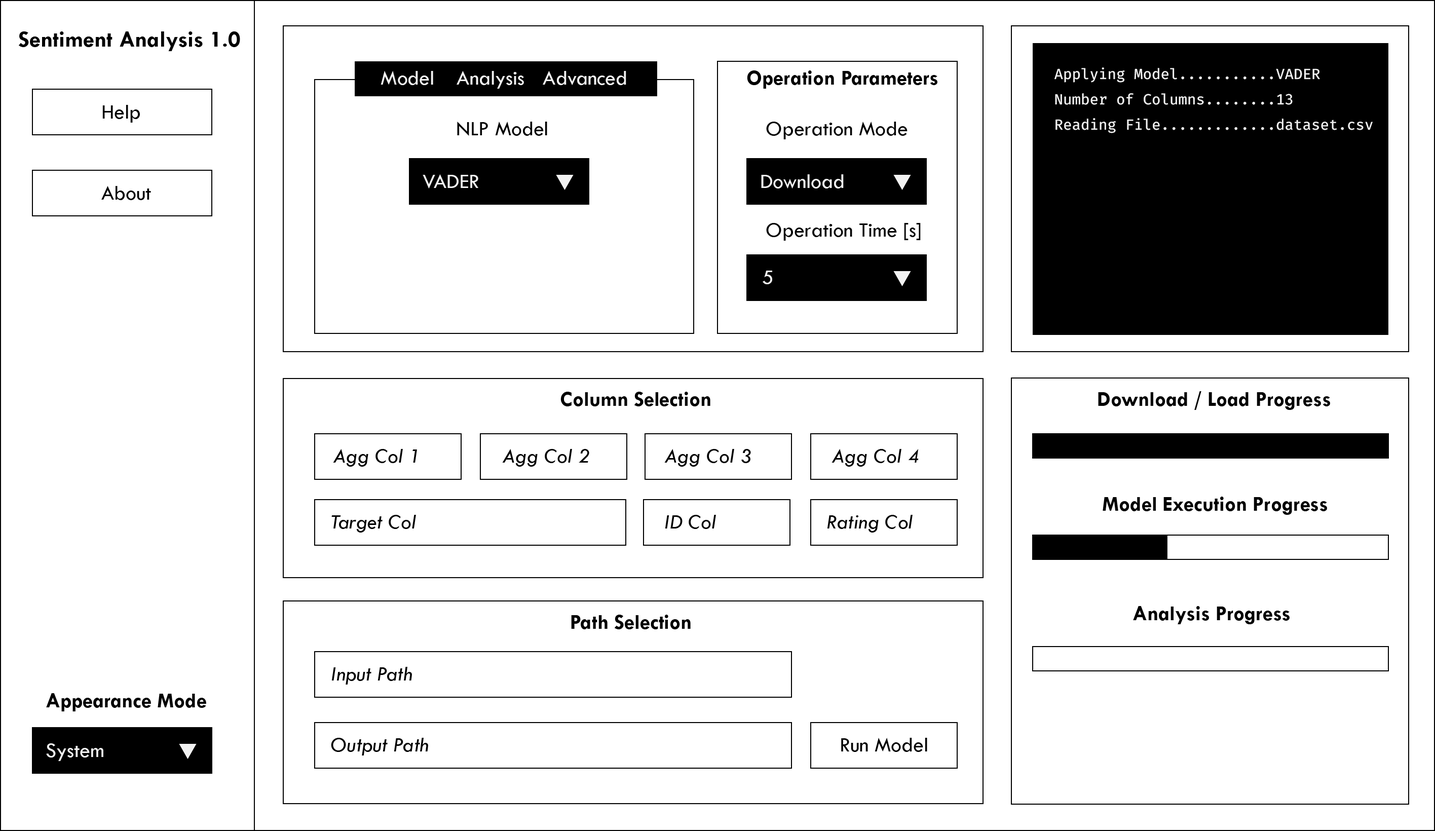
<style>
.page{position:relative;width:1435px;height:831px;background:#ffffff}
.page>*{position:absolute;margin:0}
.t1{font:23.2px "TwCenMT-Bold";color:#000000}
.t2{font:21.1px "TwCenMT-Regular";color:#f2f2f2}
.t3{font:21.1px "TwCenMT-Bold";color:#000000}
.t4{font:14.8px "FiraCode-Retina";color:#f2f2f2}
.t5{font:21.1px "TwCenMT-Regular";color:#000000}
.t6{font:21.1px "TwCenMT-Italic";color:#000000}
</style>
<div class="page">
<p class="t1" style="left:19px;top:31px;width:221px;height:20px">Sentiment Analysis 1.0</p>
<p class="t2" style="left:381px;top:71px;width:52px;height:14px">Model</p>
<p class="t2" style="left:457px;top:71px;width:67px;height:18px">Analysis</p>
<p class="t2" style="left:543px;top:71px;width:83px;height:14px">Advanced</p>
<p class="t3" style="left:747px;top:70px;width:190px;height:19px">Operation Parameters</p>
<p class="t4" style="left:1054px;top:67px;width:266px;height:16px">Applying Model...........VADER</p>
<p class="t4" style="left:1055px;top:93px;width:238px;height:12px">Number of Columns........13</p>
<p class="t5" style="left:102px;top:105px;width:38px;height:18px">Help</p>
<p class="t5" style="left:457px;top:122px;width:90px;height:14px">NLP Model</p>
<p class="t5" style="left:766px;top:122px;width:141px;height:17px">Operation Mode</p>
<p class="t4" style="left:1055px;top:118px;width:318px;height:15px">Reading File.............dataset.csv</p>
<p class="t5" style="left:101px;top:186px;width:50px;height:14px">About</p>
<p class="t2" style="left:423px;top:174px;width:55px;height:14px">VADER</p>
<p class="t2" style="left:761px;top:174px;width:83px;height:14px">Download</p>
<p class="t5" style="left:766px;top:223px;width:155px;height:18px">Operation Time [s]</p>
<p class="t2" style="left:763px;top:271px;width:9px;height:13px">5</p>
<p class="t3" style="left:560px;top:392px;width:150px;height:14px">Column Selection</p>
<p class="t3" style="left:1098px;top:391px;width:232px;height:19px">Download / Load Progress</p>
<p class="t6" style="left:333px;top:449px;width:84px;height:18px">Agg Col 1</p>
<p class="t6" style="left:502px;top:449px;width:87px;height:18px">Agg Col 2</p>
<p class="t6" style="left:664px;top:449px;width:87px;height:18px">Agg Col 3</p>
<p class="t6" style="left:831px;top:449px;width:88px;height:18px">Agg Col 4</p>
<p class="t3" style="left:1103px;top:497px;width:224px;height:18px">Model Execution Progress</p>
<p class="t6" style="left:331px;top:515px;width:85px;height:18px">Target Col</p>
<p class="t6" style="left:665px;top:515px;width:51px;height:14px">ID Col</p>
<p class="t6" style="left:827px;top:515px;width:86px;height:18px">Rating Col</p>
<p class="t3" style="left:571px;top:615px;width:120px;height:14px">Path Selection</p>
<p class="t3" style="left:1133px;top:606px;width:157px;height:18px">Analysis Progress</p>
<p class="t6" style="left:331px;top:667px;width:81px;height:18px">Input Path</p>
<p class="t3" style="left:46px;top:693px;width:160px;height:18px">Appearance Mode</p>
<p class="t6" style="left:331px;top:738px;width:97px;height:17px">Output Path</p>
<p class="t5" style="left:841px;top:738px;width:86px;height:14px">Run Model</p>
<p class="t2" style="left:46px;top:743px;width:57px;height:18px">System</p>
</div>
